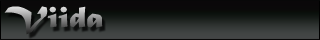
<style>
.page{position:relative;width:320px;height:40px}
.page>*{position:absolute;margin:0}
.t1{font:30.9px "MaturaMTScriptCapitals";scale:1.13 1}
</style>
<div class="page">
<p class="t1" style="left:4px;top:6px;width:99px;height:29px">Viida</p>
</div>
